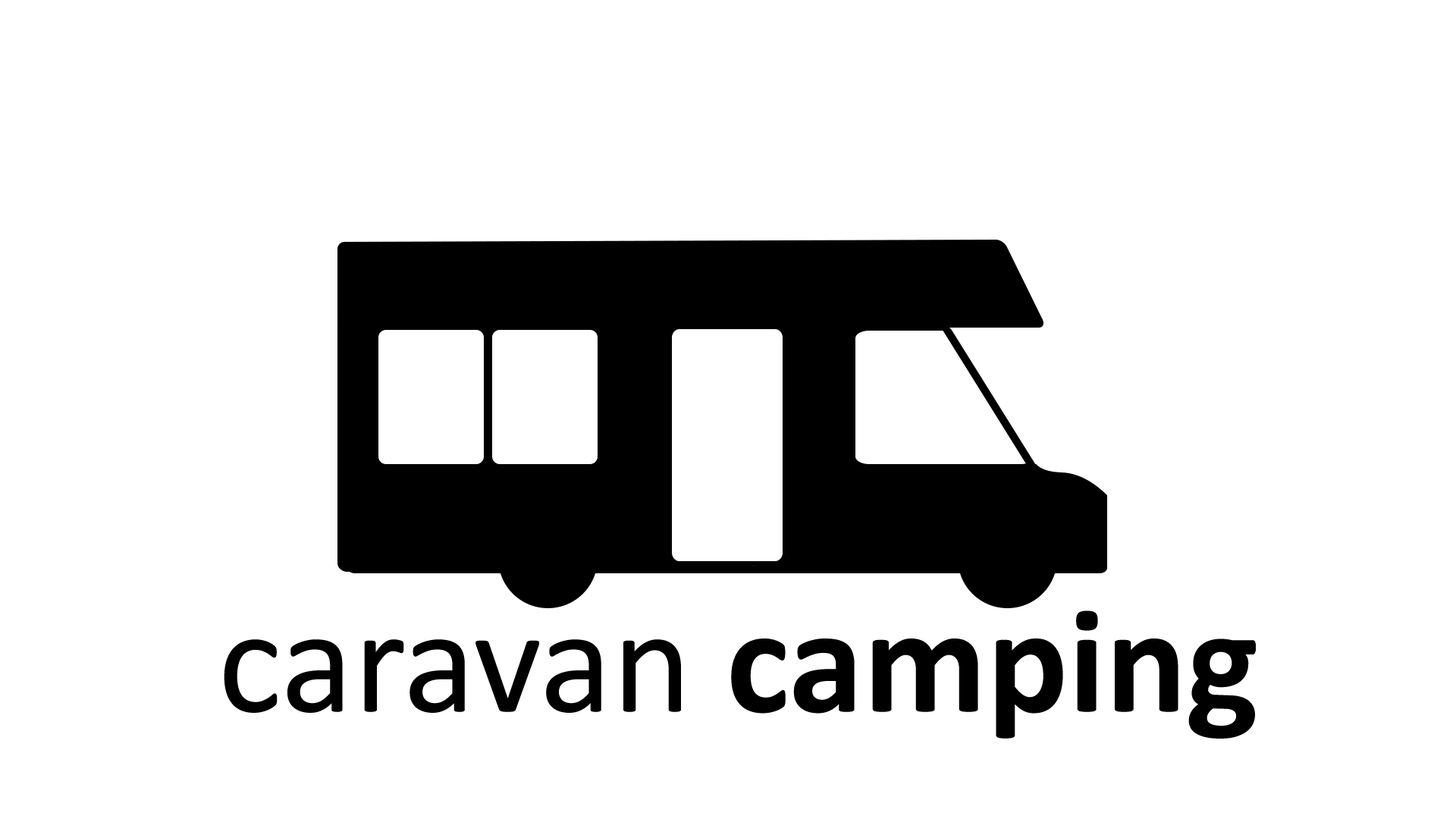
<style>
.page{position:relative;width:1456px;height:819px;background:#ffffff}
.page>*{position:absolute;margin:0}
.t1{font:151.7px "Calibri";color:#000000}
.t2{font:151.7px "Calibri-Bold";color:#000000}
</style>
<div class="page">
<p class="t1" style="left:224px;top:610px;width:1032px;height:129px">caravan<span class="t2"> camping</span></p>
</div>
